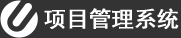
<style>
.page{position:relative;width:181px;height:38px;background:#333333}
.page>*{position:absolute;margin:0}
.t1{font:22px "SimHei";color:#ffffff;font-weight:bold}
</style>
<div class="page">
<p class="t1" style="left:44px;top:8px;width:135px;height:21px">项目管理系统</p>
</div>
